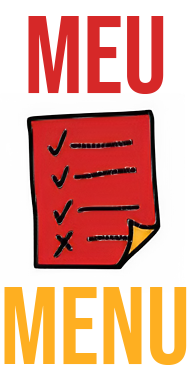
<style>
.page{position:relative;width:190px;height:384px;background:#ffffff}
.page>*{position:absolute;margin:0}
.t1{font:110px "BebasNeue-Regular";color:#d62828}
.t2{font:110px "BebasNeue-Regular";color:#feaf21}
</style>
<div class="page">
<p class="t1" style="left:28px;top:16px;width:136px;height:78px">mEU</p>
<p class="t2" style="left:4px;top:287px;width:183px;height:78px">mENU</p>
</div>
